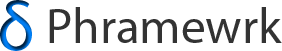
<style>
.page{position:relative;width:282px;height:51px;background:#ffffff}
.page>*{position:absolute;margin:0}
.t1{font:68.5px "MyriadPro-Regular"}
.t2{font:49.3px "MyriadPro-Regular";color:#333333}
</style>
<div class="page">
<p class="t1" style="left:0px;top:0px;width:32px;height:51px">δ</p>
<p class="t2" style="left:49px;top:7px;width:233px;height:36px">Phramewrk</p>
</div>
